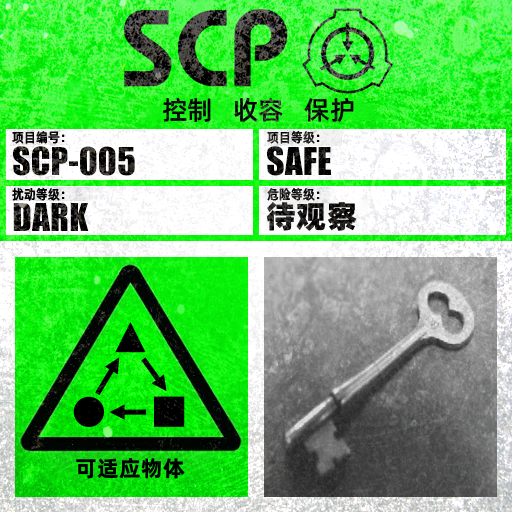
<style>
.page{position:relative;width:512px;height:512px}
.page>*{position:absolute;margin:0}
.t1{font:26px "AlibabaPuHuiTiM";color:#000000}
.t2{font:13.3px "AlibabaPuHuiTiM";letter-spacing:0.02em;color:#000000;scale:0.9 1}
.t3{font:13.3px "AlibabaPuHuiTiM";letter-spacing:0.02em;scale:0.9 1}
.t4{font:30.3px "AlibabaPuHuiTiH";letter-spacing:0.02em}
.t5{font:22px "AlibabaPuHuiTiB";letter-spacing:0.02em;color:#000000}
</style>
<div class="page">
<p class="t1" style="left:163px;top:97px;width:191px;height:26px">控制   收容   保护</p>
<p class="t2" style="left:12px;top:131px;width:53px;height:13px">项目编号：</p>
<p class="t3" style="left:267px;top:131px;width:53px;height:13px">项目等级：</p>
<p class="t2" style="left:12px;top:188px;width:53px;height:13px">扰动等级：</p>
<p class="t3" style="left:267px;top:188px;width:53px;height:13px">危险等级：</p>
<p class="t4" style="left:266px;top:202px;width:91px;height:29px">待观察</p>
<p class="t5" style="left:76px;top:458px;width:109px;height:21px">可适应物体</p>
</div>
